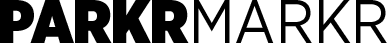
<style>
.page{position:relative;width:387px;height:43px;background:#000000}
.page>*{position:absolute;margin:0}
.t1{font:61.1px "GothamNarrow-Ultra";color:#000000}
.t2{font:61.1px "GothamNarrow-Book";color:#000000}
</style>
<div class="page">
<p class="t1" style="left:0px;top:0px;width:387px;height:43px">PARKR<span class="t2">MARKR</span></p>
</div>
